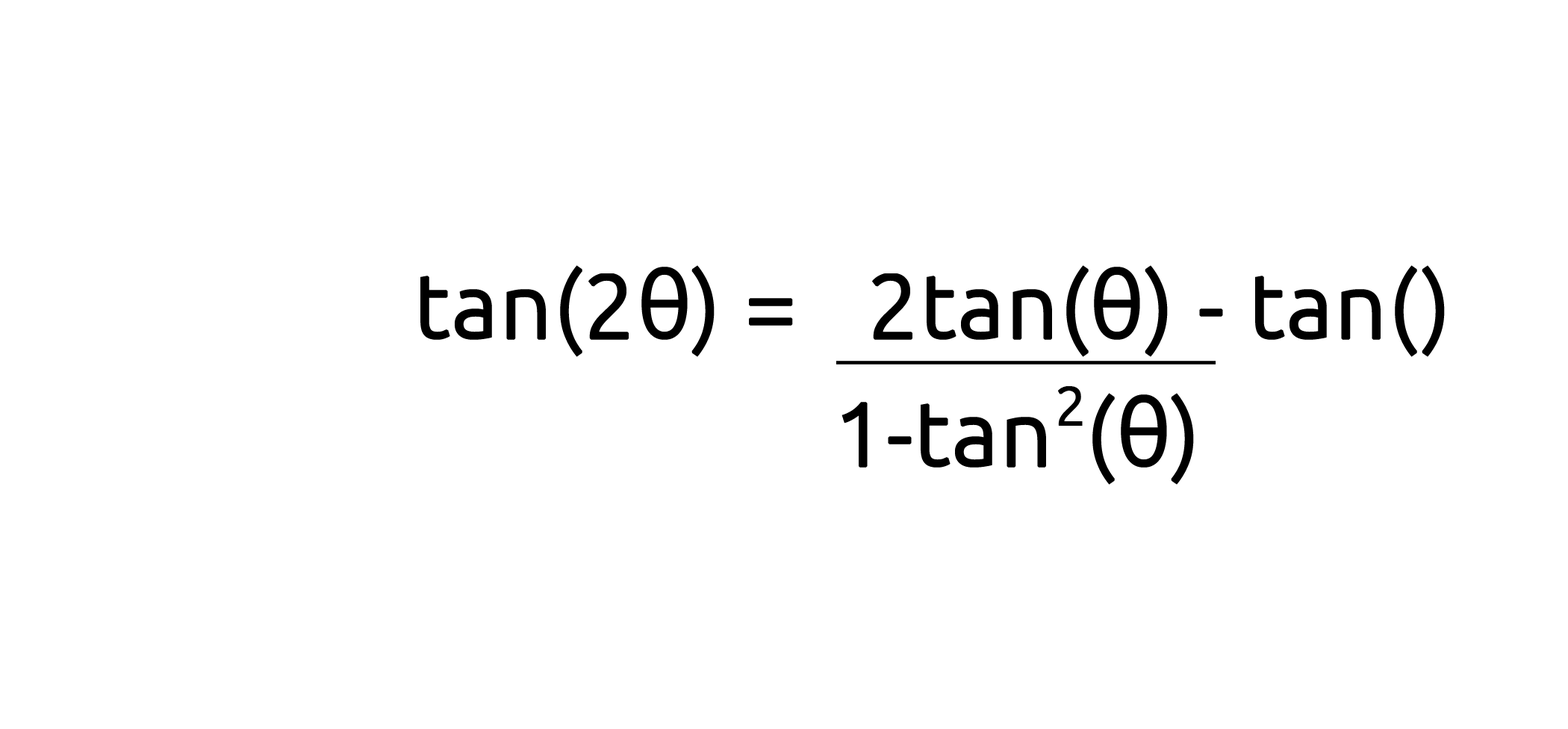
<style>
.page{position:relative;width:1568px;height:729px;background:#ffffff}
.page>*{position:absolute;margin:0}
.t1{font:90px "Ubuntu-Light";color:#000000;font-weight:bold}
.t2{font:55.2px "Ubuntu-Light";color:#000000;font-weight:bold}
</style>
<div class="page">
<p class="t1" style="left:420px;top:265px;width:1025px;height:92px">tan(2θ) =   2tan(θ) - tan()</p>
<p class="t1" style="left:841px;top:386px;width:353px;height:99px">1-tan<span class="t2">2</span>(θ)</p>
</div>
